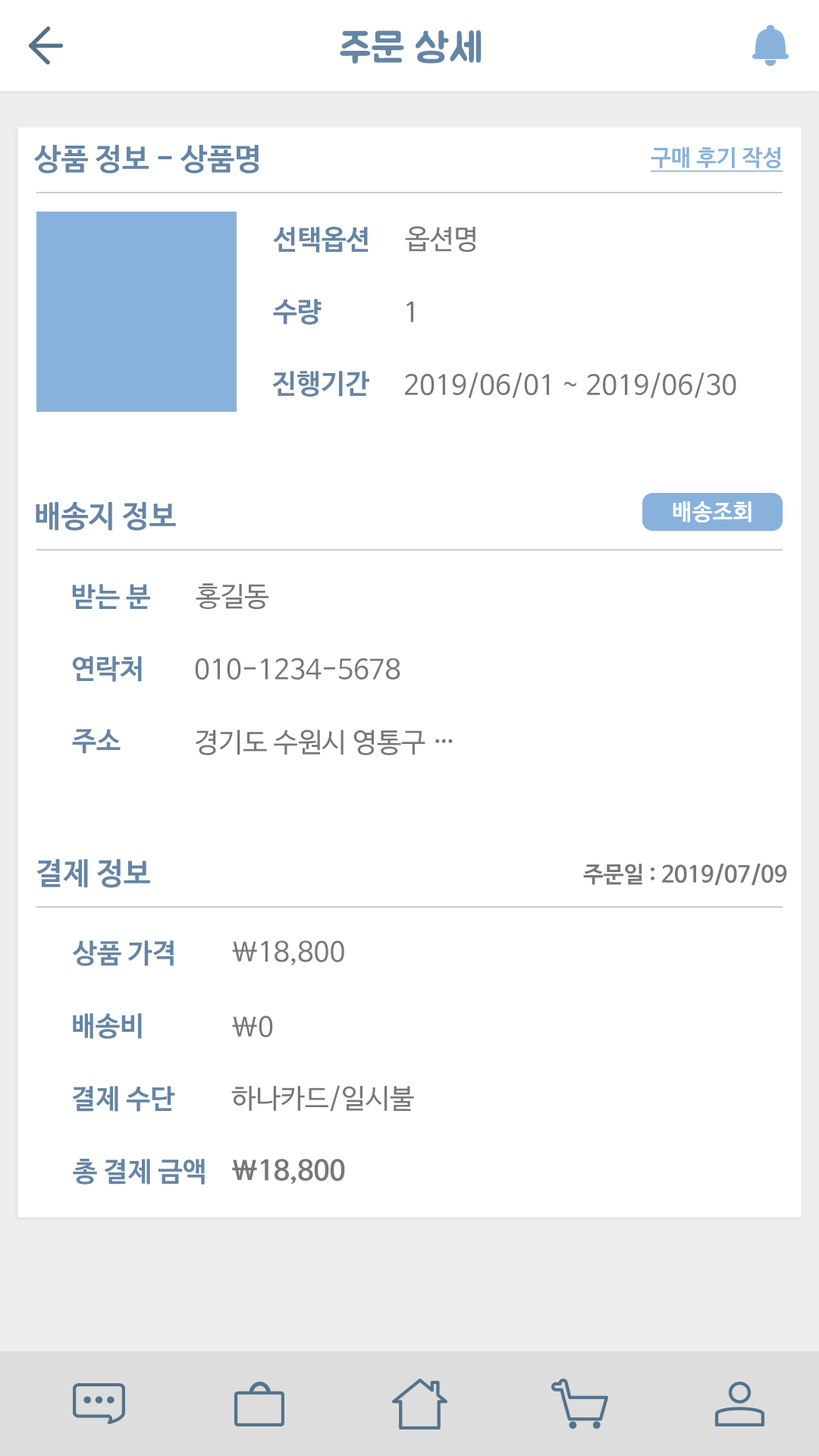
<style>
.page{position:relative;width:819px;height:1456px;background:#ffffff}
.page>*{position:absolute;margin:0}
.t1{font:40.9px "BMJUA";color:#6585a5}
.t2{font:30.3px "NanumBarunGothicBold";color:#6585a5}
.t3{font:22.7px "NanumBarunGothicBold";color:#88b2dc;text-decoration:underline}
.t4{font:27.3px "NanumBarunGothicBold";color:#6585a5}
.t5{font:27.3px "NanumBarunGothic";color:#777777}
.t6{font:22.7px "NanumBarunGothicBold";color:#ffffff}
.t7{font:22.7px "NanumBarunGothicBold";color:#777777}
.t8{font:27.3px "NanumBarunGothicBold";color:#777777}
</style>
<div class="page">
<p class="t1" style="left:340px;top:30px;width:142px;height:34px">주문 상세</p>
<p class="t2" style="left:33px;top:145px;width:226px;height:29px">상품 정보 - 상품명</p>
<p class="t3" style="left:651px;top:147px;width:132px;height:25px">구매 후기 작성</p>
<p class="t4" style="left:273px;top:227px;width:96px;height:26px">선택옵션</p>
<p class="t5" style="left:405px;top:226px;width:70px;height:27px">옵션명</p>
<p class="t4" style="left:273px;top:299px;width:49px;height:26px">수량</p>
<p class="t5" style="left:406px;top:301px;width:7px;height:21px">1</p>
<p class="t4" style="left:272px;top:371px;width:97px;height:26px">진행기간</p>
<p class="t5" style="left:405px;top:372px;width:331px;height:26px">2019/06/01 ~ 2019/06/30</p>
<p class="t2" style="left:36px;top:502px;width:140px;height:29px">배송지 정보</p>
<p class="t6" style="left:673px;top:501px;width:78px;height:21px">배송조회</p>
<p class="t4" style="left:72px;top:584px;width:78px;height:25px">받는 분</p>
<p class="t5" style="left:196px;top:583px;width:73px;height:27px">홍길동</p>
<p class="t4" style="left:72px;top:656px;width:70px;height:26px">연락처</p>
<p class="t5" style="left:195px;top:657px;width:205px;height:23px">010-1234-5678</p>
<p class="t4" style="left:72px;top:729px;width:49px;height:25px">주소</p>
<p class="t5" style="left:195px;top:730px;width:258px;height:25px">경기도 수원시 영통구 …</p>
<p class="t2" style="left:36px;top:859px;width:114px;height:29px">결제 정보</p>
<p class="t7" style="left:583px;top:863px;width:204px;height:23px">주문일 : 2019/07/09</p>
<p class="t4" style="left:72px;top:940px;width:102px;height:26px">상품 가격</p>
<p class="t5" style="left:232px;top:940px;width:112px;height:25px">\18,800</p>
<p class="t4" style="left:73px;top:1013px;width:69px;height:26px">배송비</p>
<p class="t5" style="left:232px;top:1015px;width:41px;height:22px">\0</p>
<p class="t4" style="left:72px;top:1086px;width:103px;height:26px">결제 수단</p>
<p class="t5" style="left:231px;top:1085px;width:183px;height:27px">하나카드/일시불</p>
<p class="t4" style="left:73px;top:1159px;width:132px;height:26px">총 결제 금액</p>
<p class="t8" style="left:232px;top:1159px;width:113px;height:26px">\18,800</p>
</div>
